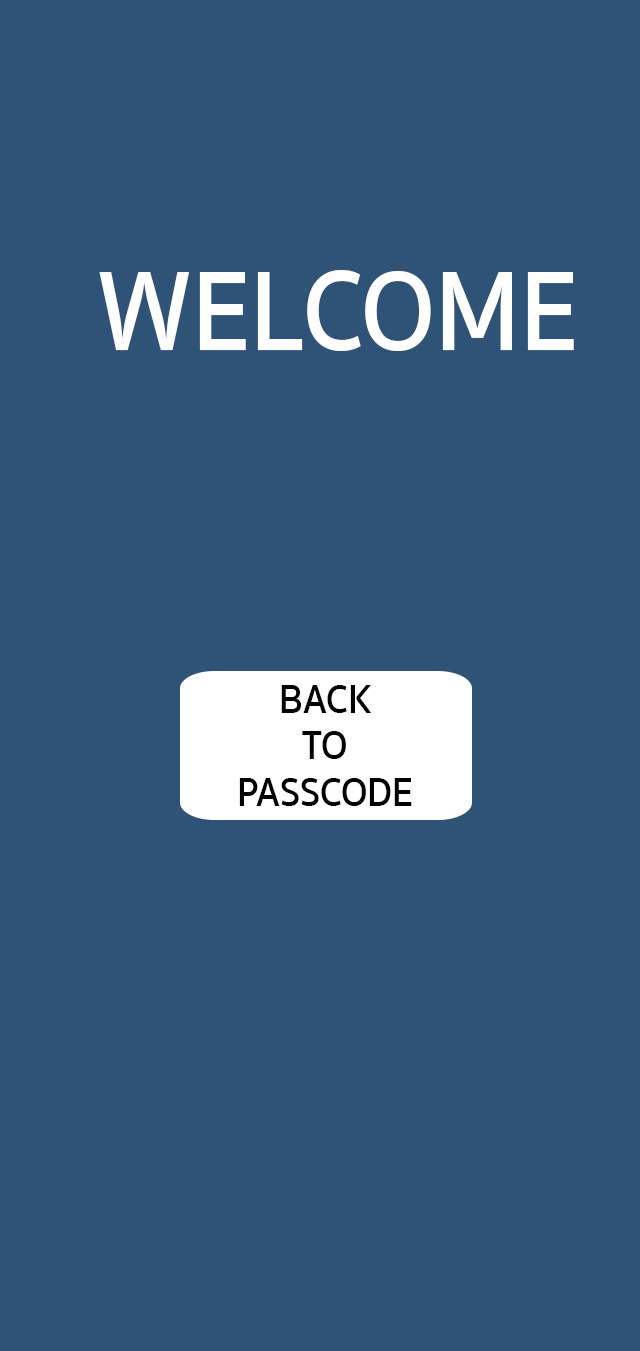
<style>
.page{position:relative;width:640px;height:1351px;background:#2e5376}
.page>*{position:absolute;margin:0}
.t1{font:116.2px "SukhumvitSet-SemiBold";color:#ffffff;scale:0.91 1}
.t2{font:41.5px/46.4px "SukhumvitSet-SemiBold";color:#010101;scale:0.91 1}
</style>
<div class="page">
<p class="t1" style="left:99px;top:270px;width:475px;height:81px">WELCOME</p>
<p class="t2" style="left:239px;top:685px;width:173px;height:121px;text-align:center">BACK<br>TO<br>PASSCODE</p>
</div>
